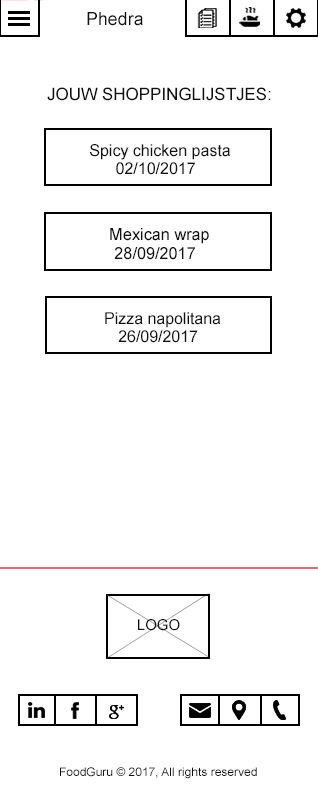
<style>
.page{position:relative;width:318px;height:799px;background:#ffffff}
.page>*{position:absolute;margin:0}
.t1{font:18px "ArialMT";color:#111111}
.t2{font:17px "ArialMT";color:#111111}
.t3{font:16.2px/18.5px "ArialMT";color:#111111}
.t4{font:16.4px/18.8px "ArialMT";color:#111111}
.t5{font:16.1px/18.4px "ArialMT";color:#111111}
</style>
<div class="page">
<p class="t1" style="left:87px;top:12px;width:56px;height:14px">Phedra</p>
<p class="t2" style="left:47px;top:87px;width:224px;height:14px">JOUW SHOPPINGLIJSTJES:</p>
<p class="t3" style="left:90px;top:144px;width:140px;height:31px;text-align:center">Spicy chicken pasta<br>02/10/2017</p>
<p class="t4" style="left:110px;top:228px;width:99px;height:32px;text-align:center">Mexican wrap<br>28/09/2017</p>
<p class="t5" style="left:105px;top:312px;width:116px;height:31px;text-align:center">Pizza napolitana<br>26/09/2017</p>
</div>
